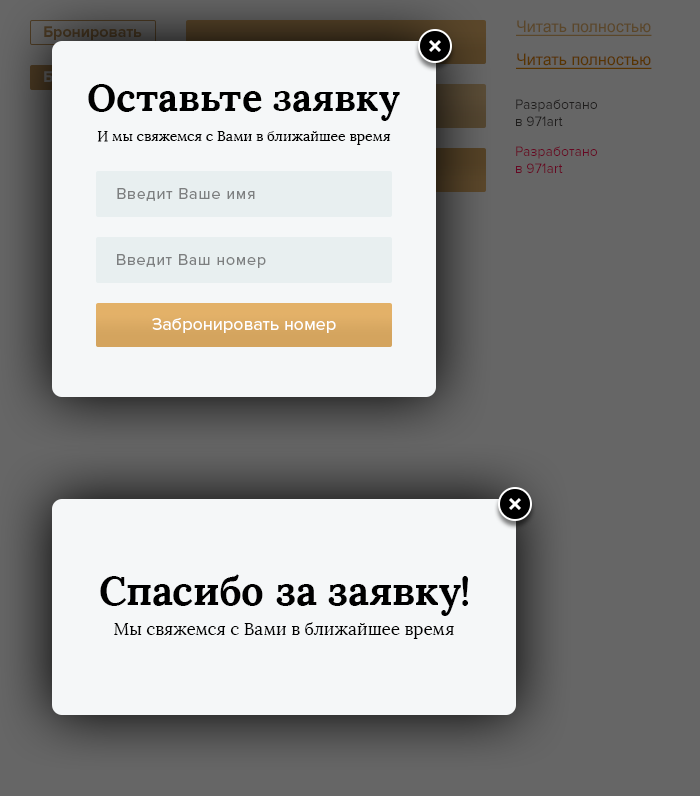
<style>
.page{position:relative;width:700px;height:796px;background:#f5f7f8}
.page>*{position:absolute;margin:0}
.t1{font:16px "ProximaNova-Bold";color:#342818}
.t2{font:16px "ArialMT";color:#5b472a;text-decoration:underline}
.t3{font:16px "ArialMT";color:#583501;text-decoration:underline}
.t4{font:38px "Lora-Bold";color:#000000}
.t5{font:14px "ProximaNova-Regular";color:#1e1d1c}
.t6{font:14px "Lora-Regular";color:#000000}
.t7{font:14px "ProximaNova-Regular";color:#660723}
.t8{font:16px "ProximaNova-Regular";letter-spacing:0.05em;color:#7d7f80}
.t9{font:18px "ProximaNova-Regular";color:#ffffff}
.t10{font:40px "Lora-Bold";color:#000000}
.t11{font:17px "Lora-Regular";color:#000000}
</style>
<div class="page">
<p class="t1" style="left:44px;top:26px;width:98px;height:14px">Бронировать</p>
<p class="t2" style="left:516px;top:20px;width:136px;height:16px">Читать полностью</p>
<p class="t3" style="left:516px;top:53px;width:136px;height:16px">Читать полностью</p>
<p class="t4" style="left:88px;top:84px;width:312px;height:37px">Оставьте заявку</p>
<p class="t5" style="left:516px;top:99px;width:81px;height:27px">Разработано <br>в 971art</p>
<p class="t6" style="left:97px;top:131px;width:294px;height:14px">И мы свяжемся с Вами в ближайшее время</p>
<p class="t7" style="left:516px;top:146px;width:81px;height:27px">Разработано <br>в 971art</p>
<p class="t8" style="left:117px;top:188px;width:138px;height:13px">Введит Ваше имя</p>
<p class="t8" style="left:117px;top:254px;width:149px;height:14px">Введит Ваш номер</p>
<p class="t9" style="left:152px;top:318px;width:184px;height:15px">Забронировать номер</p>
<p class="t10" style="left:100px;top:574px;width:368px;height:42px">Спасибо за заявку!</p>
<p class="t11" style="left:114px;top:622px;width:340px;height:17px">Мы свяжемся с Вами в ближайшее время</p>
</div>
